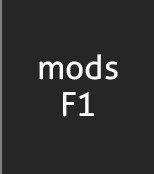
<style>
.page{position:relative;width:154px;height:174px;background:#262626}
.page>*{position:absolute;margin:0}
.t1{font:33.3px "Aller-Regular";color:#ffffff}
</style>
<div class="page">
<p class="t1" style="left:39px;top:54px;width:79px;height:26px">mods</p>
<p class="t1" style="left:63px;top:92px;width:31px;height:25px">F1</p>
</div>
